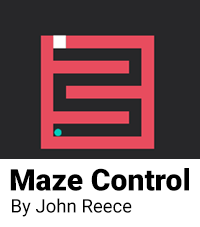
<style>
.page{position:relative;width:200px;height:227px;background:#272729}
.page>*{position:absolute;margin:0}
.t1{font:30.1px "Roboto-Black";color:#000000}
.t2{font:18.6px "Roboto-Regular";color:#000000}
</style>
<div class="page">
<p class="t1" style="left:10px;top:168px;width:179px;height:23px">Maze Control</p>
<p class="t2" style="left:12px;top:198px;width:120px;height:19px">By John Reece</p>
</div>
